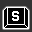
<style>
.page{position:relative;width:32px;height:32px;background:#000000}
.page>*{position:absolute;margin:0}
.t1{font:14px "Arial-BoldMT";color:#ffffff}
</style>
<div class="page">
<p class="t1" style="left:12px;top:11px;width:7px;height:10px">S</p>
</div>
